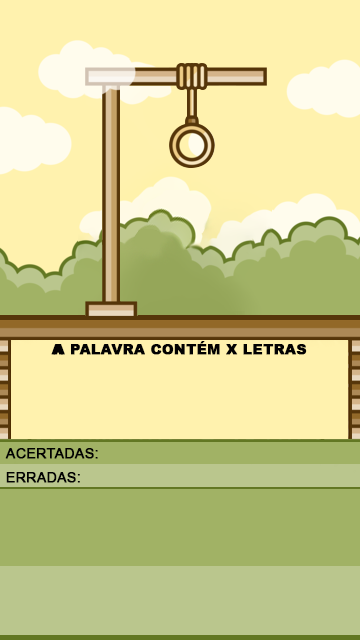
<style>
.page{position:relative;width:360px;height:640px;background:#fff2ae}
.page>*{position:absolute;margin:0}
.t1{font:13.8px "Arial-Black";letter-spacing:0.017em;color:#020202;text-transform:uppercase;font-weight:bold}
.t2{font:13.8px "ArialMT";letter-spacing:0.017em;color:#020202;text-transform:uppercase;font-weight:bold}
</style>
<div class="page">
<p class="t1" style="left:53px;top:341px;width:254px;height:14px">A palavra contém x letras</p>
<p class="t1" style="left:51px;top:344px;width:12px;height:11px">a</p>
<p class="t2" style="left:5px;top:448px;width:93px;height:11px">acertadas:</p>
<p class="t2" style="left:6px;top:472px;width:74px;height:11px">erradas:</p>
</div>
